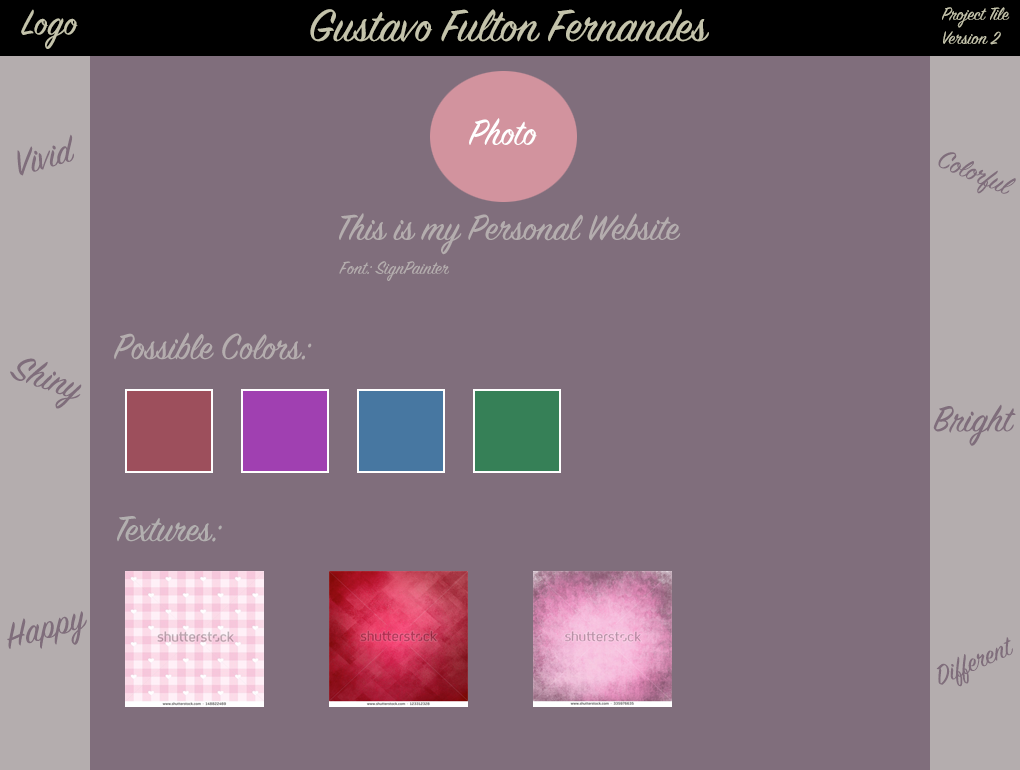
<style>
.page{position:relative;width:1020px;height:770px;background:#806e7c}
.page>*{position:absolute;margin:0}
.t1{font:40px "SignPainter-HouseScript";color:#c4c3ab}
.t2{font:50px "SignPainter-HouseScript";color:#c4c3ab}
.t3{font:20px/24px "SignPainter-HouseScript";color:#c4c3ab}
.t4{font:40px "SignPainter-HouseScript";color:#ffffff}
.t5{font:40px "SignPainter-HouseScript";color:#7f6d7b}
.t6{font:30px "SignPainter-HouseScript";color:#7f6d7b}
.t7{font:40px "SignPainter-HouseScript";color:#b4adae}
.t8{font:20px "SignPainter-HouseScript";color:#b4adae}
.t9{font:40px "SignPainter-HouseScript";color:#b2afaf}
</style>
<div class="page">
<p class="t1" style="left:21px;top:9px;width:57px;height:40px">Logo</p>
<p class="t2" style="left:310px;top:9px;width:399px;height:33px">Gustavo Fulton Fernandes</p>
<p class="t3" style="left:942px;top:7px;width:68px;height:38px">Project Tile<br>Version 2</p>
<p class="t4" style="left:469px;top:118px;width:68px;height:27px">Photo</p>
<p class="t5" style="left:17px;top:134px;width:57px;height:42px;rotate:-16deg">Vivid</p>
<p class="t6" style="left:938px;top:152px;width:78px;height:42px;rotate:23deg">Colorful</p>
<p class="t7" style="left:339px;top:213px;width:342px;height:42px">This is my Personal Website</p>
<p class="t8" style="left:339px;top:261px;width:110px;height:20px">Font: SignPainter</p>
<p class="t7" style="left:114px;top:332px;width:198px;height:28px">Possible Colors:</p>
<p class="t5" style="left:10px;top:358px;width:72px;height:51px;rotate:19deg">Shiny</p>
<p class="t5" style="left:933px;top:404px;width:83px;height:42px">Bright</p>
<p class="t9" style="left:117px;top:516px;width:105px;height:26px">Textures:</p>
<p class="t5" style="left:7px;top:611px;width:80px;height:38px;rotate:-16deg">Happy</p>
<p class="t6" style="left:936px;top:637px;width:77px;height:50px;rotate:-24deg">Different</p>
</div>
